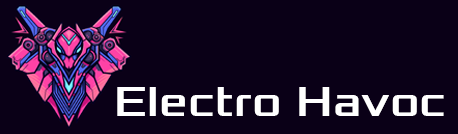
<style>
.page{position:relative;width:458px;height:134px;background:#0a0017}
.page>*{position:absolute;margin:0}
.t1{font:44.2px "Xolonium";color:#ffffff}
</style>
<div class="page">
<p class="t1" style="left:117px;top:87px;width:327px;height:29px">Electro Havoc</p>
</div>
